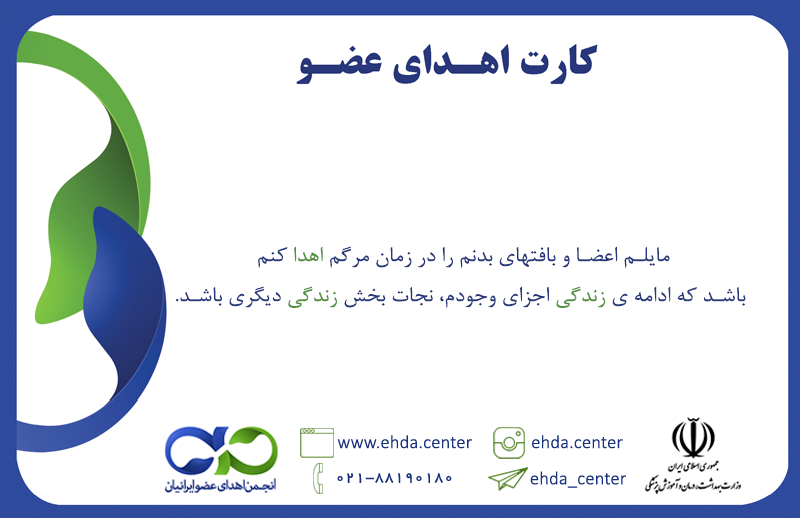
<style>
.page{position:relative;width:800px;height:518px;background:#ffffff}
.page>*{position:absolute;margin:0}
.t1{font:24.1px/40px "BNazanin";letter-spacing:0.01em;color:#27387a;scale:1.06 1}
.t2{font:24.1px/40px "BNazanin";letter-spacing:0.01em;color:#548f40;scale:1.06 1}
.t3{font:18.6px "Calibri-Light";letter-spacing:0.01em;color:#18307a}
.t4{font:16.6px "BYekan";letter-spacing:0.01em;color:#18307a}
</style>
<div class="page">
<p class="t1" style="left:176px;top:246px;width:570px;height:63px;text-align:center">مایلم اعضا و بافتهای بدنم را در زمان مرگم <span class="t2">اهدا </span>کنم<br>باشد که ادامه ی <span class="t2">زندگی </span>اجزای وجودم، نجات بخش <span class="t2">زندگی </span>دیگری باشد.</p>
<p class="t3" style="left:337px;top:435px;width:135px;height:14px">www.ehda.center</p>
<p class="t3" style="left:532px;top:435px;width:91px;height:14px">ehda.center</p>
<p class="t4" style="left:337px;top:473px;width:115px;height:10px">88190180-021</p>
<p class="t3" style="left:530px;top:471px;width:96px;height:17px">ehda_center</p>
</div>
